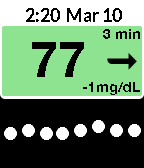
<style>
.page{position:relative;width:144px;height:168px;background:#000000}
.page>*{position:absolute;margin:0}
.t1{font:18px "Lato-Bold";color:#000000}
.t2{font:14px "HelveticaNeue-Bold";color:#000000}
.t3{font:50px "HelveticaNeue-Bold";color:#000000}
</style>
<div class="page">
<p class="t1" style="left:26px;top:8px;width:96px;height:14px">2:20  Mar 10</p>
<p class="t2" style="left:103px;top:29px;width:37px;height:10px">3 min</p>
<p class="t3" style="left:32px;top:42px;width:52px;height:35px">77</p>
<p class="t2" style="left:83px;top:82px;width:57px;height:13px">-1mg/dL</p>
</div>
